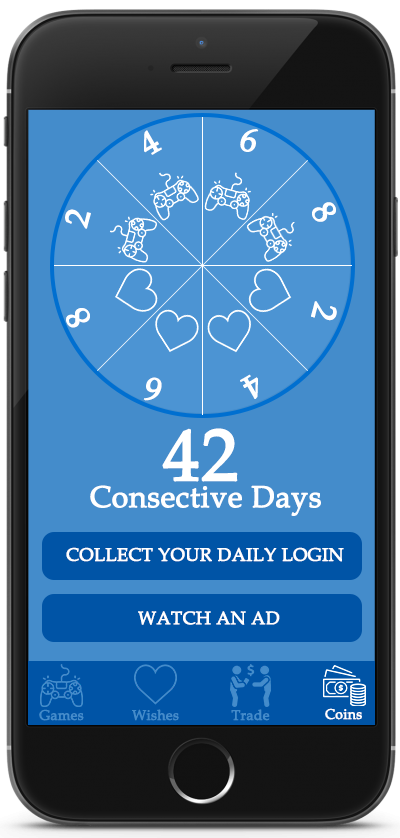
<style>
.page{position:relative;width:400px;height:838px;background:#448ccb}
.page>*{position:absolute;margin:0}
.t1{font:32.8px "BookAntiqua";color:#ffffff;font-weight:bold}
.t2{font:32.7px "BookAntiqua";color:#ffffff;font-weight:bold}
.t3{font:72px "BookAntiqua";color:#ffffff;font-weight:bold}
.t4{font:30px "BookAntiqua";color:#ffffff;font-weight:bold}
.t5{font:18px "BookAntiqua";color:#ffffff;font-weight:bold}
.t6{font:14px "BookAntiqua";color:#448ccb;font-weight:bold}
.t7{font:14px "BookAntiqua";color:#ffffff;font-weight:bold}
</style>
<div class="page">
<p class="t1" style="left:144px;top:130px;width:18px;height:25px;rotate:-30deg">4</p>
<p class="t1" style="left:240px;top:129px;width:19px;height:23px;rotate:15deg">6</p>
<p class="t1" style="left:65px;top:209px;width:26px;height:20px;rotate:-75deg">2</p>
<p class="t1" style="left:312px;top:202px;width:24px;height:20px;rotate:60deg">8</p>
<p class="t1" style="left:311px;top:301px;width:26px;height:20px;rotate:105deg">2</p>
<p class="t1" style="left:66px;top:308px;width:24px;height:20px;rotate:-120deg">8</p>
<p class="t2" style="left:143px;top:377px;width:19px;height:24px;rotate:-165deg">6</p>
<p class="t2" style="left:240px;top:374px;width:18px;height:25px;rotate:150deg">4</p>
<p class="t3" style="left:162px;top:428px;width:76px;height:54px">42</p>
<p class="t4" style="left:90px;top:485px;width:231px;height:31px">Consective Days</p>
<p class="t5" style="left:66px;top:547px;width:278px;height:15px">COLLECT YOUR DAILY LOGIN</p>
<p class="t5" style="left:138px;top:611px;width:142px;height:14px">WATCH AN AD</p>
<p class="t6" style="left:39px;top:709px;width:45px;height:12px">Games</p>
<p class="t6" style="left:132px;top:709px;width:47px;height:12px">Wishes</p>
<p class="t6" style="left:231px;top:709px;width:39px;height:12px">Trade</p>
<p class="t7" style="left:325px;top:708px;width:37px;height:12px">Coins</p>
</div>
